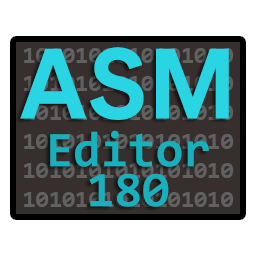
<style>
.page{position:relative;width:256px;height:256px;background:#ffffff}
.page>*{position:absolute;margin:0}
.t1{font:98px "AbletonSansSmall-Bold";color:#29d4e3}
.t2{font:24px "Consolas-Bold"}
.t3{font:50px "Consolas-Bold";color:#19b0bd}
</style>
<div class="page">
<p class="t1" style="left:20px;top:47px;width:209px;height:73px">ASM</p>
<p class="t2" style="left:23px;top:48px;width:211px;height:159px;text-align:center">101010101010101010101010101010101010101010101010101010101010101010101010101010101010101010101010</p>
<p class="t3" style="left:50px;top:130px;width:159px;height:77px;text-align:center">Editor<br>180</p>
</div>
